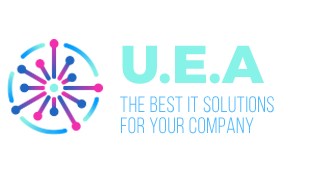
<style>
.page{position:relative;width:315px;height:170px;background:#ffffff}
.page>*{position:absolute;margin:0}
.t1{font:53px "Montserrat-ExtraBold";color:#87f2e7;text-transform:uppercase}
.t2{font:22px/20.7px "BebasNeueBook";letter-spacing:0.019em;color:#50b9ff;text-transform:uppercase}
</style>
<div class="page">
<p class="t1" style="left:122px;top:45px;width:142px;height:39px">U.E.A</p>
<p class="t2" style="left:120px;top:96px;width:154px;height:38px">the best it solutions<br>for your company</p>
</div>
